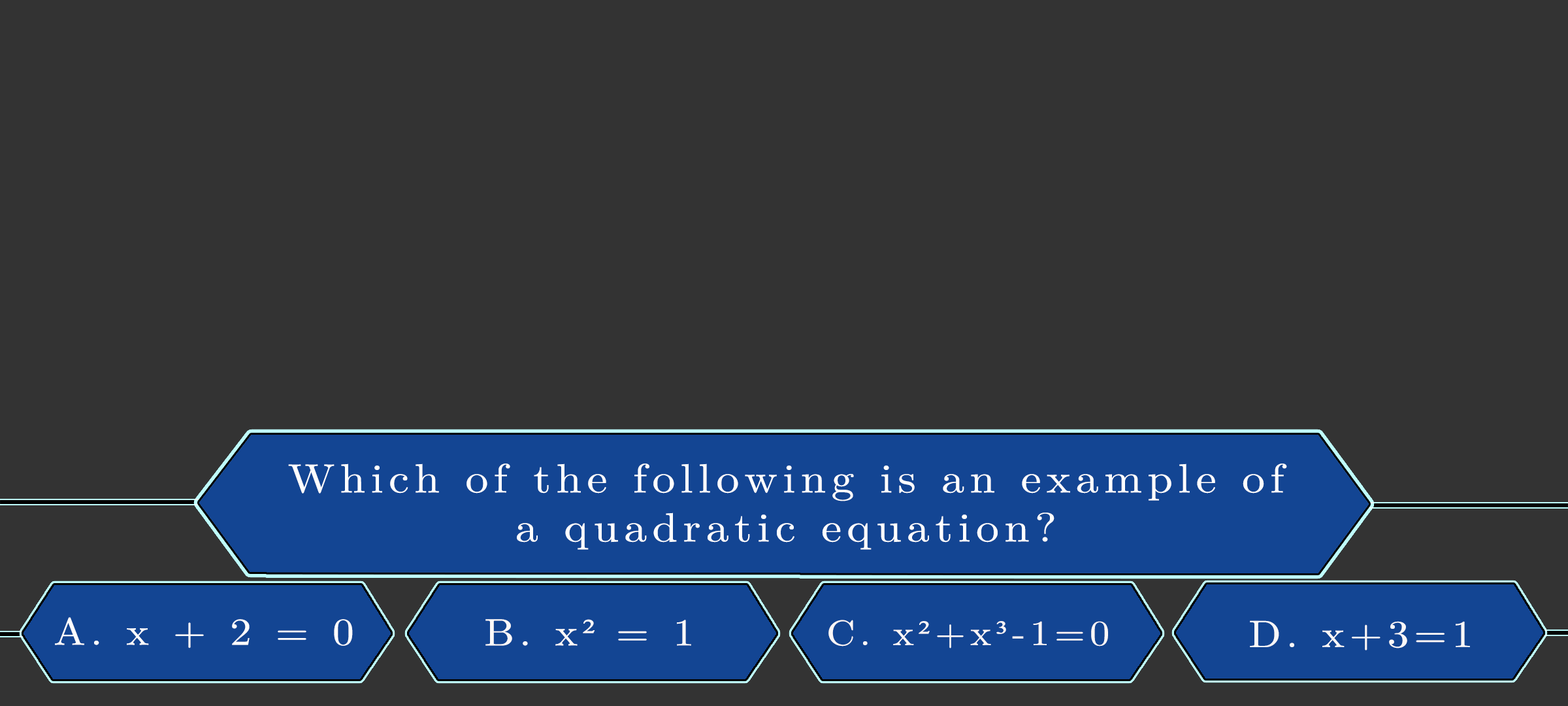
<style>
.page{position:relative;width:1568px;height:706px;background:#333333}
.page>*{position:absolute;margin:0}
.t1{font:40.8px/49px "LatinModernMath-Regular";letter-spacing:0.115em;color:#ffffff;scale:1.12 1}
.t2{font:38.1px "LatinModernMath-Regular";letter-spacing:0.115em;color:#fffefe;scale:1.12 1}
.t3{font:38.1px "LatinModernMath-Regular";letter-spacing:0.115em;color:#fffefe;text-transform:uppercase;scale:1.12 1}
.t4{font:38.1px "LatinModernMath-Regular";letter-spacing:0.115em;color:#fdf9f9;text-transform:uppercase;scale:1.12 1}
.t5{font:38.1px "LatinModernMath-Regular";letter-spacing:0.115em;color:#fdf9f9;scale:1.12 1}
.t6{font:38.1px "TimesNewRomanPSMT";letter-spacing:0.115em;color:#fdf9f9;scale:1.12 1}
.t7{font:35.4px "LatinModernMath-Regular";letter-spacing:0.115em;color:#fcf7f7;scale:1.12 1}
.t8{font:35.4px "LatinModernMath-Regular";letter-spacing:0.115em;color:#fcf7f7;text-transform:uppercase;scale:1.12 1}
.t9{font:35.4px "TimesNewRomanPSMT";letter-spacing:0.115em;color:#fcf7f7;scale:1.12 1}
.t10{font:38.1px "LatinModernMath-Regular";letter-spacing:0.115em;color:#fbf8f8;scale:1.12 1}
.t11{font:38.1px "LatinModernMath-Regular";letter-spacing:0.115em;color:#fbf8f8;text-transform:uppercase;scale:1.12 1}
</style>
<div class="page">
<p class="t1" style="left:288px;top:463px;width:999px;height:86px;text-align:center">Which of the following is an example of<br>a quadratic equation?</p>
<p class="t2" style="left:55px;top:617px;width:298px;height:31px"><span class="t3">a. </span>x + 2 = 0</p>
<p class="t4" style="left:485px;top:619px;width:206px;height:26px">b. <span class="t5">x</span><span class="t6">² </span>= 1</p>
<p class="t7" style="left:828px;top:619px;width:280px;height:29px"><span class="t8">c. </span>x<span class="t9">²</span>+x<span class="t9">³</span>-1=0</p>
<p class="t10" style="left:1250px;top:620px;width:220px;height:30px"><span class="t11">d. </span>x+3=1</p>
</div>
